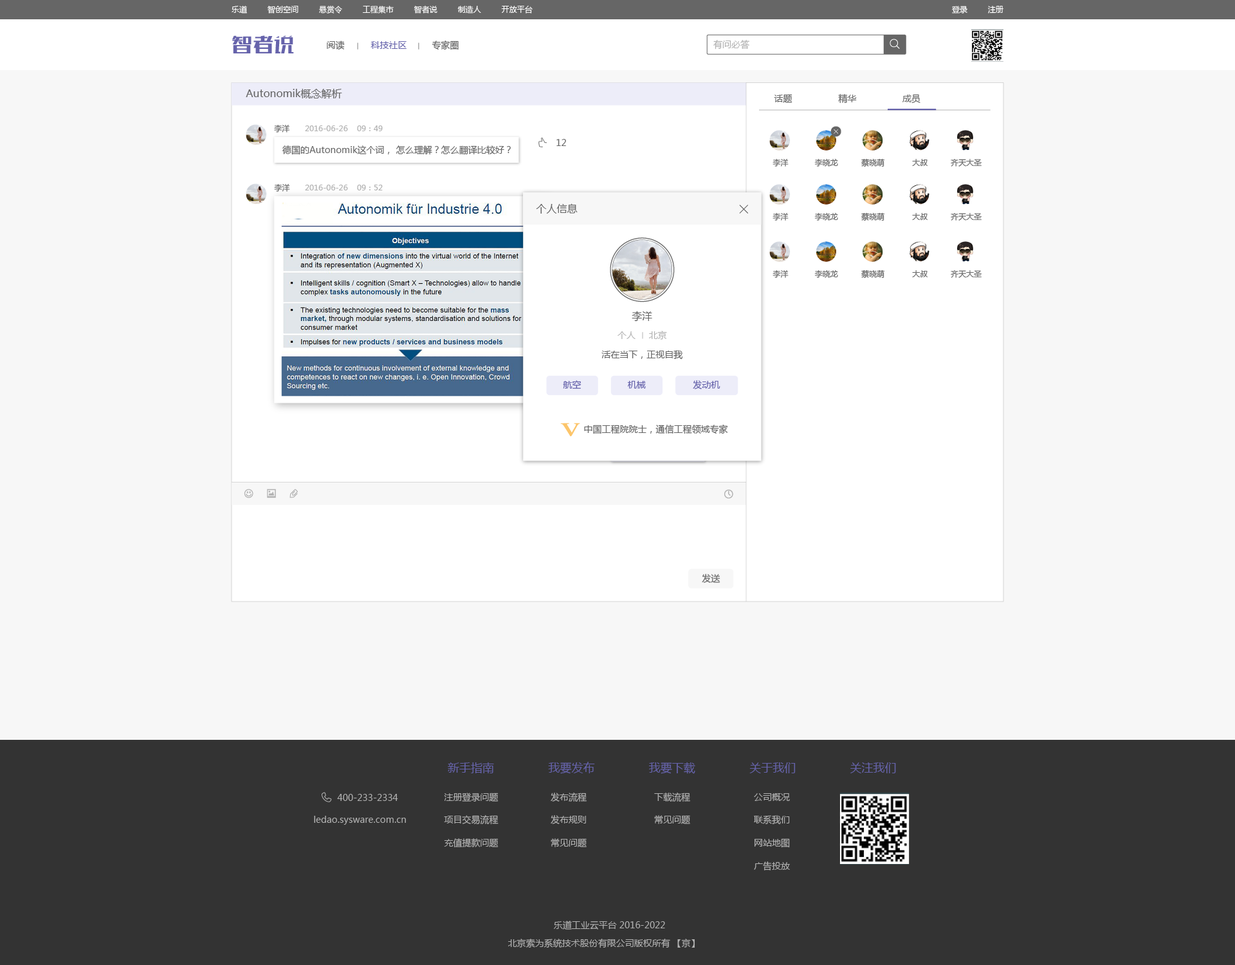
<style>
.page{position:relative;width:1235px;height:965px;background:#f7f7f7}
.page>*{position:absolute;margin:0}
.t1{font:7.7px "MicrosoftYaHei";color:#ffffff}
.t2{font:19.3px "FZSKJW--GB1-0";color:#6663ab;scale:1.08 1}
.t3{font:9px "MicrosoftYaHei";color:#666666}
.t4{font:9px "MicrosoftYaHei";color:#6663ab}
.t5{font:9px "MicrosoftYaHei";color:#b2b2b2}
.t6{font:10.3px "MicrosoftYaHei";color:#666666}
.t7{font:7.7px "MicrosoftYaHei";color:#666666}
.t8{font:7.7px "MicrosoftYaHei";color:#b2b2b2}
.t9{font:11.6px "MicrosoftYaHei";color:#6663ab}
</style>
<div class="page">
<p class="t1" style="left:232px;top:5px;width:301px;height:9px">乐道         智创空间         悬赏令         工程集市         智者说         制造人         开放平台</p>
<p class="t1" style="left:952px;top:6px;width:52px;height:8px">登录         注册</p>
<p class="t2" style="left:232px;top:35px;width:62px;height:18px">智者说</p>
<p class="t3" style="left:327px;top:41px;width:18px;height:9px">阅读</p>
<p class="t4" style="left:371px;top:41px;width:36px;height:8px">科技社区</p>
<p class="t3" style="left:432px;top:41px;width:27px;height:9px">专家圈</p>
<p class="t5" style="left:714px;top:40px;width:36px;height:10px">有问必答</p>
<p class="t6" style="left:246px;top:89px;width:96px;height:9px">Autonomik概念解析</p>
<p class="t3" style="left:774px;top:94px;width:19px;height:9px">话题</p>
<p class="t3" style="left:838px;top:94px;width:19px;height:10px">精华</p>
<p class="t3" style="left:903px;top:94px;width:18px;height:10px">成员</p>
<p class="t7" style="left:274px;top:124px;width:16px;height:9px">李洋</p>
<p class="t8" style="left:305px;top:125px;width:78px;height:6px">2016-06-26    09：49</p>
<p class="t3" style="left:282px;top:145px;width:229px;height:10px">德国的Autonomik这个词， 怎么理解？怎么翻译比较好？</p>
<p class="t3" style="left:557px;top:139px;width:9px;height:7px">12</p>
<p class="t7" style="left:773px;top:158px;width:16px;height:9px">李洋</p>
<p class="t7" style="left:815px;top:158px;width:23px;height:9px">李晓龙</p>
<p class="t7" style="left:862px;top:158px;width:23px;height:9px">蔡晓萌</p>
<p class="t7" style="left:912px;top:159px;width:17px;height:7px">大叔</p>
<p class="t7" style="left:951px;top:159px;width:31px;height:8px">齐天大圣</p>
<p class="t7" style="left:274px;top:183px;width:16px;height:9px">李洋</p>
<p class="t8" style="left:305px;top:185px;width:78px;height:5px">2016-06-26    09：52</p>
<p class="t6" style="left:536px;top:203px;width:42px;height:11px">个人信息</p>
<p class="t7" style="left:773px;top:212px;width:16px;height:9px">李洋</p>
<p class="t7" style="left:815px;top:212px;width:23px;height:9px">李晓龙</p>
<p class="t7" style="left:862px;top:212px;width:23px;height:9px">蔡晓萌</p>
<p class="t7" style="left:912px;top:213px;width:17px;height:7px">大叔</p>
<p class="t7" style="left:951px;top:213px;width:31px;height:8px">齐天大圣</p>
<p class="t7" style="left:773px;top:270px;width:16px;height:8px">李洋</p>
<p class="t7" style="left:815px;top:270px;width:23px;height:8px">李晓龙</p>
<p class="t7" style="left:862px;top:270px;width:23px;height:8px">蔡晓萌</p>
<p class="t7" style="left:912px;top:270px;width:17px;height:7px">大叔</p>
<p class="t7" style="left:951px;top:270px;width:31px;height:8px">齐天大圣</p>
<p class="t6" style="left:632px;top:311px;width:20px;height:11px">李洋</p>
<p class="t5" style="left:618px;top:331px;width:49px;height:9px">个人     北京</p>
<p class="t3" style="left:602px;top:350px;width:81px;height:10px">活在当下，正视自我</p>
<p class="t4" style="left:563px;top:380px;width:19px;height:9px">航空</p>
<p class="t4" style="left:627px;top:381px;width:19px;height:8px">机械</p>
<p class="t4" style="left:693px;top:380px;width:28px;height:9px">发动机</p>
<p class="t3" style="left:584px;top:425px;width:144px;height:9px">中国工程院院士，通信工程领域专家</p>
<p class="t3" style="left:702px;top:574px;width:19px;height:9px">发送</p>
<p class="t9" style="left:548px;top:762px;width:47px;height:12px">我要发布</p>
<p class="t9" style="left:448px;top:762px;width:46px;height:11px">新手指南</p>
<p class="t9" style="left:649px;top:762px;width:47px;height:12px">我要下载</p>
<p class="t9" style="left:750px;top:762px;width:46px;height:11px">关于我们</p>
<p class="t9" style="left:850px;top:762px;width:46px;height:11px">关注我们</p>
<p class="t5" style="left:337px;top:794px;width:61px;height:7px">400-233-2334</p>
<p class="t5" style="left:444px;top:793px;width:55px;height:9px">注册登录问题</p>
<p class="t5" style="left:551px;top:793px;width:36px;height:9px">发布流程</p>
<p class="t5" style="left:654px;top:793px;width:36px;height:9px">下载流程</p>
<p class="t5" style="left:754px;top:793px;width:36px;height:8px">公司概况</p>
<p class="t5" style="left:314px;top:816px;width:92px;height:9px">ledao.sysware.com.cn</p>
<p class="t5" style="left:444px;top:815px;width:55px;height:10px">项目交易流程</p>
<p class="t5" style="left:551px;top:815px;width:35px;height:9px">发布规则</p>
<p class="t5" style="left:654px;top:815px;width:36px;height:9px">常见问题</p>
<p class="t5" style="left:754px;top:815px;width:36px;height:10px">联系我们</p>
<p class="t5" style="left:444px;top:838px;width:55px;height:10px">充值提款问题</p>
<p class="t5" style="left:551px;top:838px;width:36px;height:9px">常见问题</p>
<p class="t5" style="left:755px;top:838px;width:35px;height:10px">网站地图</p>
<p class="t5" style="left:754px;top:862px;width:36px;height:9px">广告投放</p>
<p class="t5" style="left:554px;top:921px;width:111px;height:9px">乐道工业云平台 2016-2022</p>
<p class="t5" style="left:508px;top:939px;width:187px;height:9px">北京索为系统技术股份有限公司版权所有 【京】</p>
</div>
